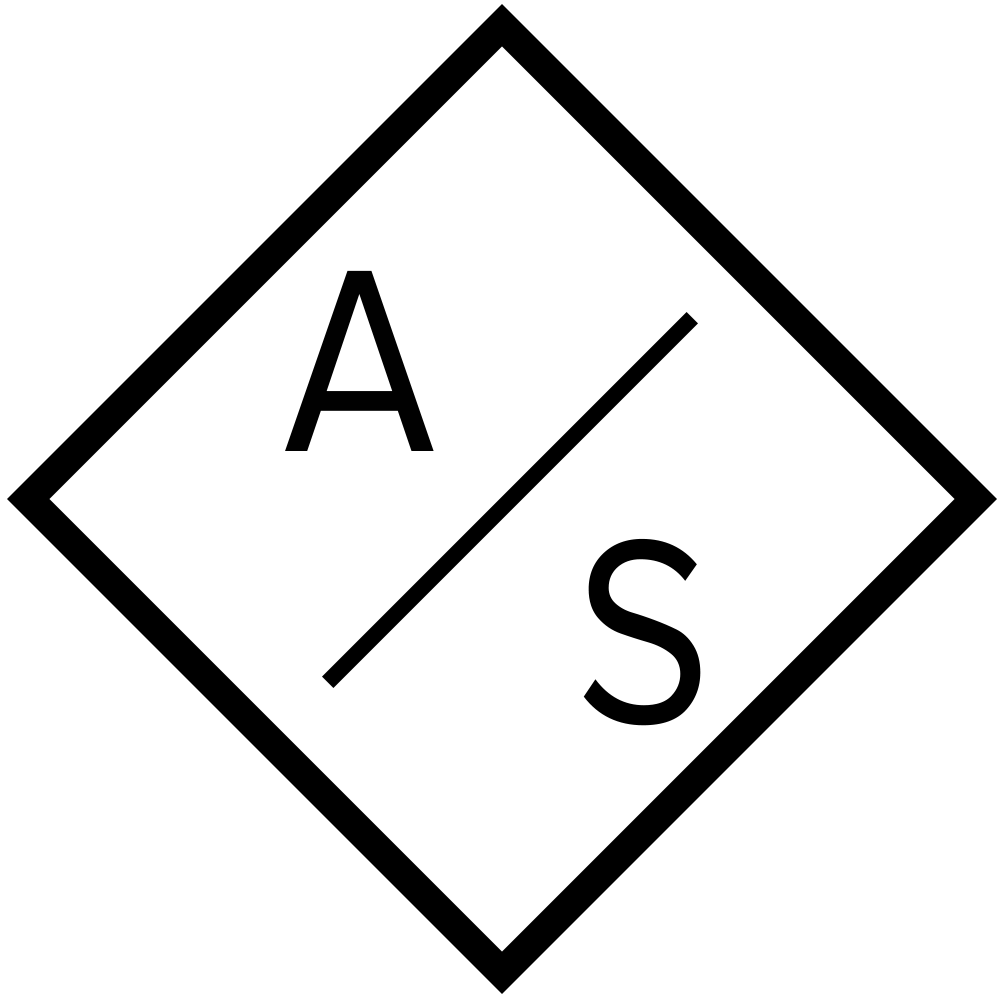
<style>
.page{position:relative;width:1000px;height:1000px;background:#ffffff}
.page>*{position:absolute;margin:0}
.t1{font:270px "ProximaNova-Regular";color:#010101;scale:0.86 1}
.t2{font:270px "ProximaNova-Regular";color:#000000;scale:0.86 1}
</style>
<div class="page">
<p class="t1" style="left:285px;top:270px;width:149px;height:181px">A</p>
<p class="t2" style="left:583px;top:538px;width:118px;height:188px">S</p>
</div>
